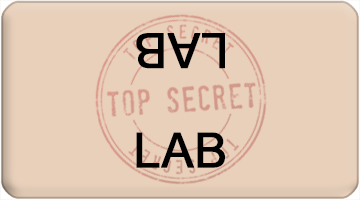
<style>
.page{position:relative;width:360px;height:200px;background:#e8d0bb}
.page>*{position:absolute;margin:0}
.t1{font:48px "ArialMT";color:#000000;font-weight:bold}
</style>
<div class="page">
<p class="t1" style="left:136px;top:33px;width:89px;height:36px;rotate:180deg">LAB</p>
<p class="t1" style="left:136px;top:132px;width:89px;height:36px">LAB</p>
</div>
